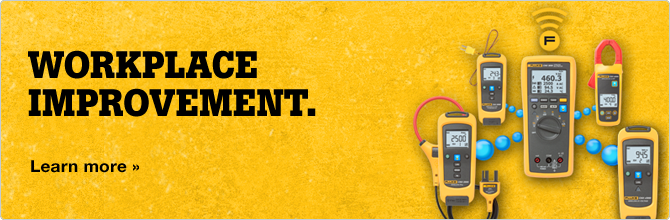
<style>
.page{position:relative;width:670px;height:220px}
.page>*{position:absolute;margin:0}
.t1{font:38px/38px "BotonPro-Bold";letter-spacing:-0.005em;color:#000000;text-transform:uppercase}
.t2{font:16.5px "HelveticaNeueLTCYR-Bd";letter-spacing:0.018em;color:#000000;scale:1.04 1}
</style>
<div class="page">
<p class="t1" style="left:28px;top:50px;width:288px;height:67px">workplace <br>IMPROVEMENT.</p>
<p class="t2" style="left:31px;top:160px;width:108px;height:13px">Learn more »</p>
</div>
